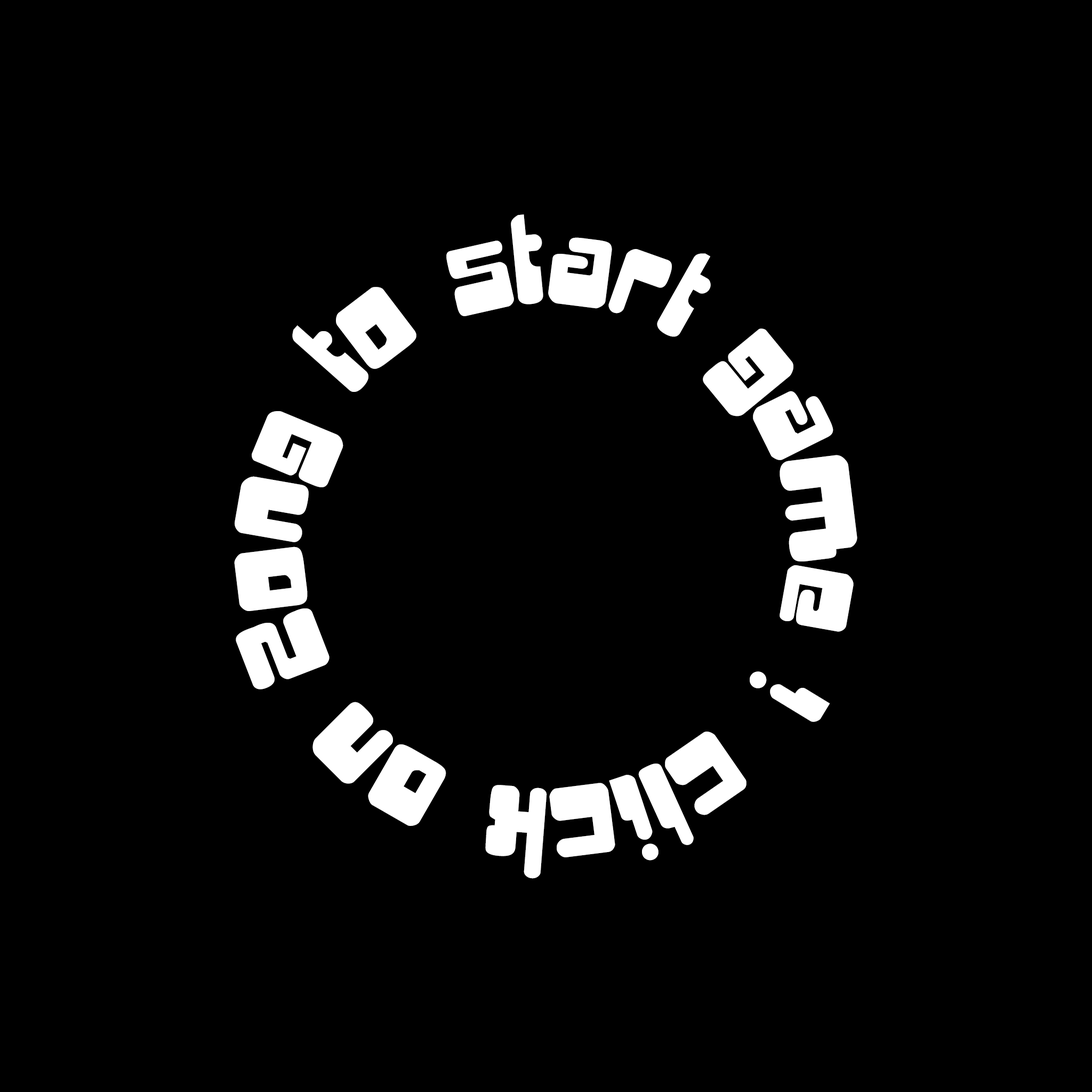
<style>
.page{position:relative;width:1092px;height:1092px;background:#000000}
.page>*{position:absolute;margin:0}
.t1{font:81.6px/21.3px "Digifit";letter-spacing:0.04em;color:#ffffff}
</style>
<div class="page">
<p class="t1" style="left:234px;top:214px;width:623px;height:665px;text-align:center">click on Zong to start game !</p>
</div>
